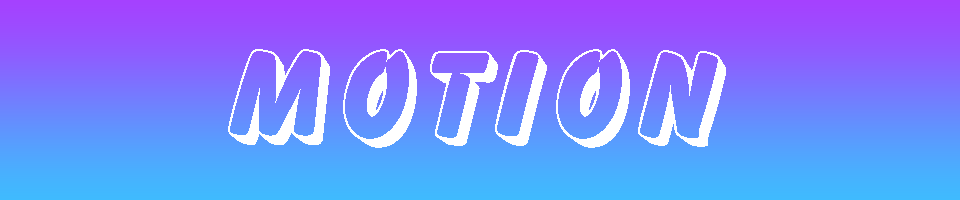
<style>
.page{position:relative;width:960px;height:200px}
.page>*{position:absolute;margin:0}
.t1{font:144px "BalloonDroShaD";letter-spacing:0.05em;color:#ffffff;text-transform:uppercase}
</style>
<div class="page">
<p class="t1" style="left:228px;top:49px;width:498px;height:99px">motion</p>
</div>
